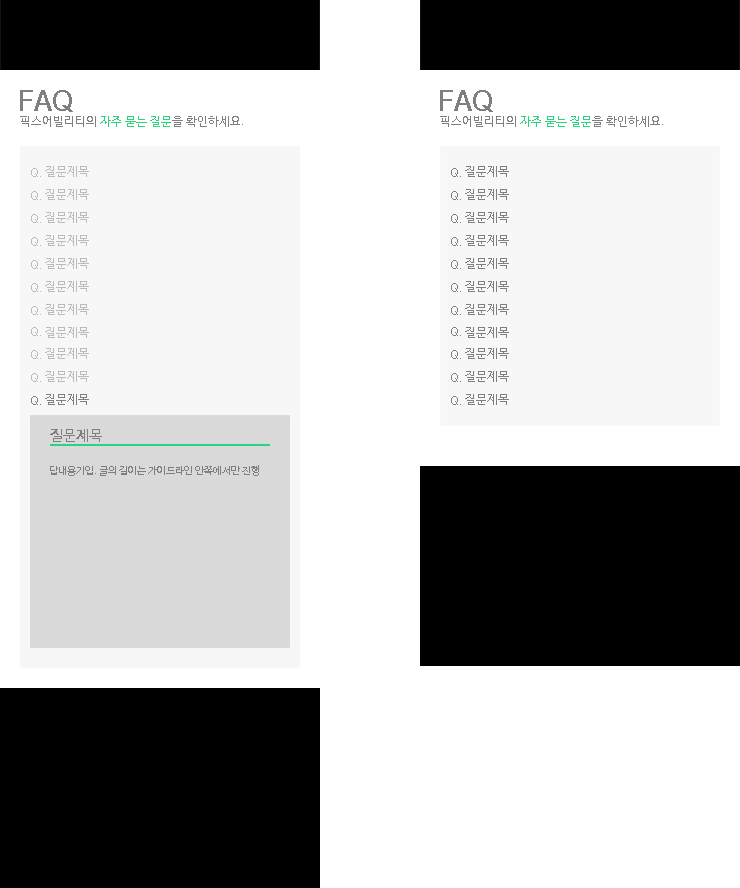
<style>
.page{position:relative;width:740px;height:888px;background:#ffffff}
.page>*{position:absolute;margin:0}
.t1{font:28px "NanumBarunGothicBold";color:#7f7f7f}
.t2{font:12px "NanumBarunGothic";color:#28d47c}
.t3{font:12px "NanumBarunGothic";color:#7f7f7f}
.t4{font:12px "NanumBarunGothic";color:#bbbbbb}
.t5{font:15px "NanumBarunGothicBold";color:#7f7f7f}
.t6{font:10px "NanumBarunGothic";color:#7f7f7f}
</style>
<div class="page">
<p class="t1" style="left:20px;top:90px;width:53px;height:22px">FAQ</p>
<p class="t1" style="left:440px;top:90px;width:53px;height:22px">FAQ</p>
<p class="t2" style="left:20px;top:116px;width:223px;height:11px"><span class="t3">픽스어빌리티의 </span>자주 묻는 질문<span class="t3">을 확인하세요.</span></p>
<p class="t2" style="left:440px;top:116px;width:223px;height:11px"><span class="t3">픽스어빌리티의 </span>자주 묻는 질문<span class="t3">을 확인하세요.</span></p>
<p class="t4" style="left:31px;top:168px;width:10px;height:9px">Q.</p>
<p class="t4" style="left:45px;top:166px;width:44px;height:11px">질문제목</p>
<p class="t3" style="left:451px;top:168px;width:10px;height:9px">Q.</p>
<p class="t3" style="left:465px;top:166px;width:44px;height:11px">질문제목</p>
<p class="t4" style="left:31px;top:191px;width:10px;height:9px">Q.</p>
<p class="t4" style="left:45px;top:189px;width:44px;height:11px">질문제목</p>
<p class="t3" style="left:451px;top:191px;width:10px;height:9px">Q.</p>
<p class="t3" style="left:465px;top:189px;width:44px;height:11px">질문제목</p>
<p class="t4" style="left:31px;top:214px;width:10px;height:9px">Q.</p>
<p class="t4" style="left:45px;top:212px;width:44px;height:11px">질문제목</p>
<p class="t3" style="left:451px;top:214px;width:10px;height:9px">Q.</p>
<p class="t3" style="left:465px;top:212px;width:44px;height:11px">질문제목</p>
<p class="t4" style="left:31px;top:237px;width:10px;height:9px">Q.</p>
<p class="t4" style="left:45px;top:235px;width:44px;height:11px">질문제목</p>
<p class="t3" style="left:451px;top:237px;width:10px;height:9px">Q.</p>
<p class="t3" style="left:465px;top:235px;width:44px;height:11px">질문제목</p>
<p class="t4" style="left:31px;top:260px;width:10px;height:9px">Q.</p>
<p class="t4" style="left:45px;top:258px;width:44px;height:11px">질문제목</p>
<p class="t3" style="left:451px;top:260px;width:10px;height:9px">Q.</p>
<p class="t3" style="left:465px;top:258px;width:44px;height:11px">질문제목</p>
<p class="t4" style="left:45px;top:281px;width:44px;height:11px">질문제목</p>
<p class="t3" style="left:465px;top:281px;width:44px;height:11px">질문제목</p>
<p class="t4" style="left:31px;top:283px;width:10px;height:9px">Q.</p>
<p class="t3" style="left:451px;top:283px;width:10px;height:9px">Q.</p>
<p class="t4" style="left:45px;top:304px;width:44px;height:11px">질문제목</p>
<p class="t3" style="left:465px;top:304px;width:44px;height:11px">질문제목</p>
<p class="t4" style="left:31px;top:306px;width:10px;height:9px">Q.</p>
<p class="t3" style="left:451px;top:306px;width:10px;height:9px">Q.</p>
<p class="t4" style="left:31px;top:327px;width:10px;height:9px">Q.</p>
<p class="t4" style="left:45px;top:327px;width:44px;height:11px">질문제목</p>
<p class="t3" style="left:451px;top:327px;width:10px;height:9px">Q.</p>
<p class="t3" style="left:465px;top:327px;width:44px;height:11px">질문제목</p>
<p class="t4" style="left:31px;top:350px;width:10px;height:9px">Q.</p>
<p class="t4" style="left:45px;top:348px;width:44px;height:11px">질문제목</p>
<p class="t3" style="left:451px;top:350px;width:10px;height:9px">Q.</p>
<p class="t3" style="left:465px;top:348px;width:44px;height:11px">질문제목</p>
<p class="t4" style="left:31px;top:373px;width:10px;height:9px">Q.</p>
<p class="t4" style="left:45px;top:371px;width:44px;height:11px">질문제목</p>
<p class="t3" style="left:451px;top:373px;width:10px;height:9px">Q.</p>
<p class="t3" style="left:465px;top:371px;width:44px;height:11px">질문제목</p>
<p class="t3" style="left:31px;top:396px;width:10px;height:9px">Q.</p>
<p class="t3" style="left:45px;top:394px;width:44px;height:11px">질문제목</p>
<p class="t3" style="left:451px;top:396px;width:10px;height:9px">Q.</p>
<p class="t3" style="left:465px;top:394px;width:44px;height:11px">질문제목</p>
<p class="t5" style="left:50px;top:429px;width:52px;height:13px">질문제목</p>
<p class="t6" style="left:50px;top:465px;width:209px;height:11px">답내용기입. 글의 길이는 가이드라인 안쪽에서만 진행</p>
</div>
